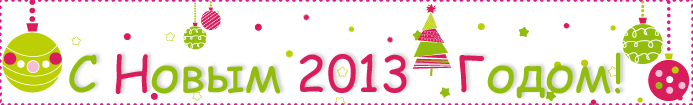
<style>
.page{position:relative;width:693px;height:105px;background:#ffffff}
.page>*{position:absolute;margin:0}
.t1{font:50px "ComicSansMS";color:#d91c5c}
.t2{font:50px "ComicSansMS";color:#93be0e}
</style>
<div class="page">
<p class="t1" style="left:69px;top:52px;width:552px;height:47px"><span class="t2">С </span>Н<span class="t2">овым </span>2013   Г<span class="t2">одом!</span></p>
</div>
